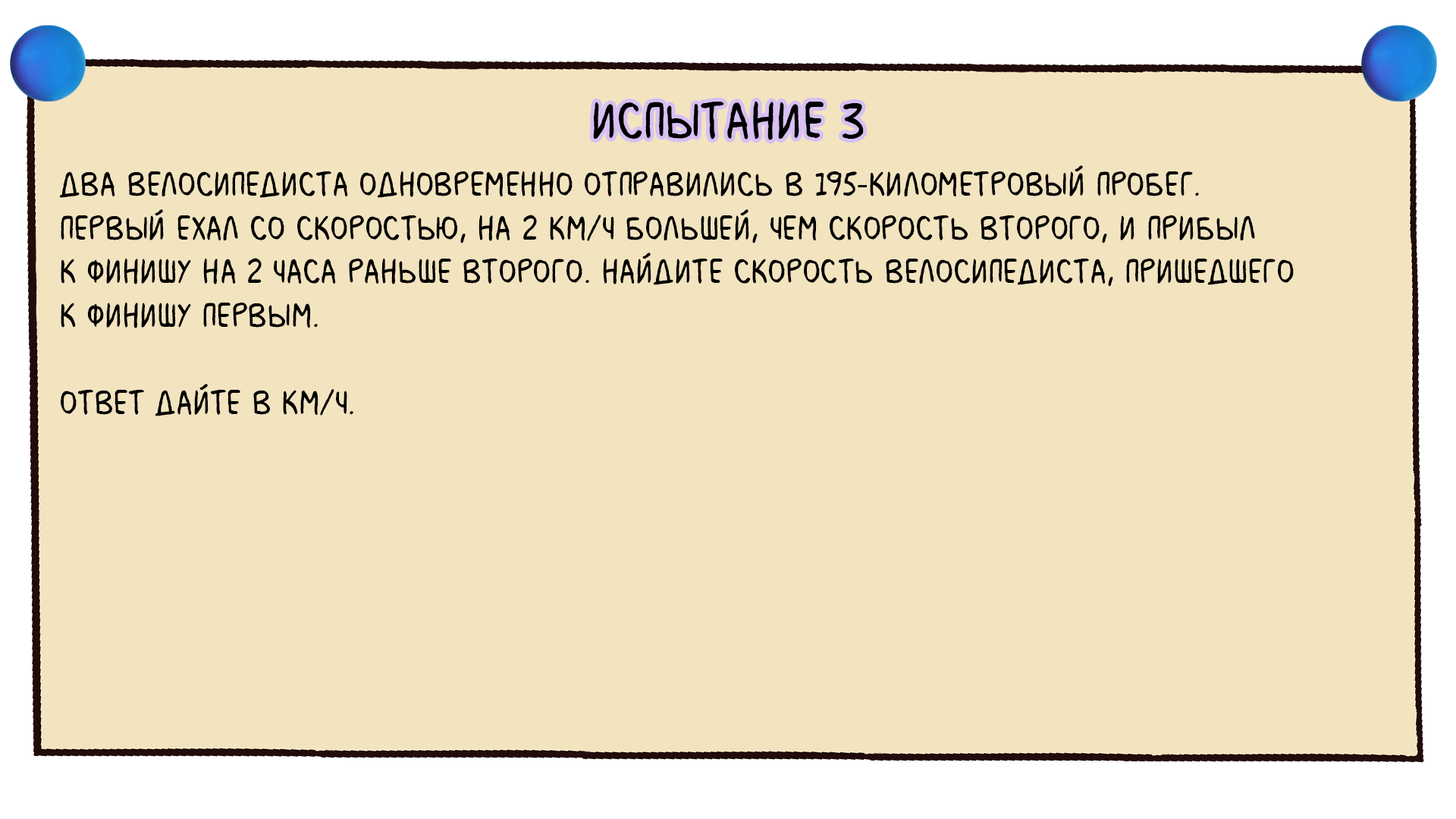
<style>
.page{position:relative;width:1456px;height:819px;background:#f3e4c0}
.page>*{position:absolute;margin:0}
.t1{font:54.6px "MilkMustacheBB";color:#000000}
.t2{font:36.4px "MilkMustacheBB";color:#000000}
.t3{font:36.4px "MyriadPro-Regular";color:#000000}
</style>
<div class="page">
<p class="t1" style="left:593px;top:101px;width:271px;height:39px">испытание 3</p>
<p class="t2" style="left:59px;top:165px;width:1235px;height:251px">Два велосипедиста одновременно отправились в 195<span class="t3">‐</span>километровый пробег. <br>Первый ехал со скоростью, на 2 км/ч большей, чем скорость второго, и прибыл <br>к финишу на 2 часа раньше второго. Найдите скорость велосипедиста, пришедшего <br>к финишу первым. <br><br>Ответ дайте в км/ч.</p>
</div>
